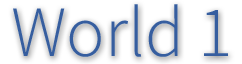
<style>
.page{position:relative;width:242px;height:64px;background:#ffffff}
.page>*{position:absolute;margin:0}
.t1{font:72px "SourceSansPro-Light";color:#365e9f}
</style>
<div class="page">
<p class="t1" style="left:13px;top:4px;width:215px;height:53px">World 1</p>
</div>
